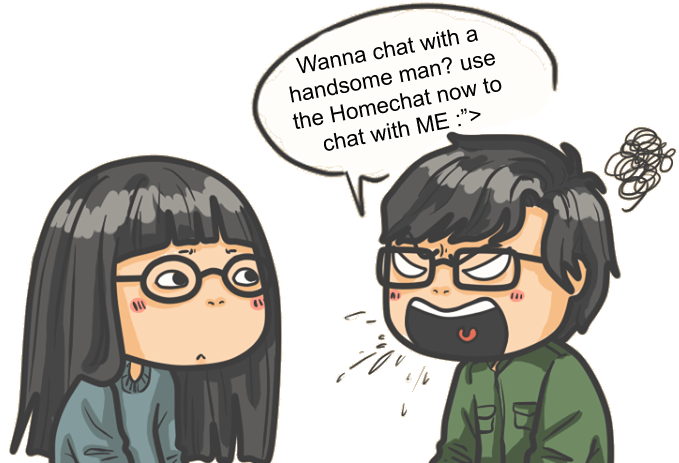
<style>
.page{position:relative;width:679px;height:463px;background:#ffffff}
.page>*{position:absolute;margin:0}
.t1{font:22.5px "ArialMT";color:#010101}
</style>
<div class="page">
<p class="t1" style="left:289px;top:29px;width:213px;height:122px;rotate:-11deg">Wanna chat with a handsome man? use the Homechat now to chat with ME :”&gt;</p>
</div>
